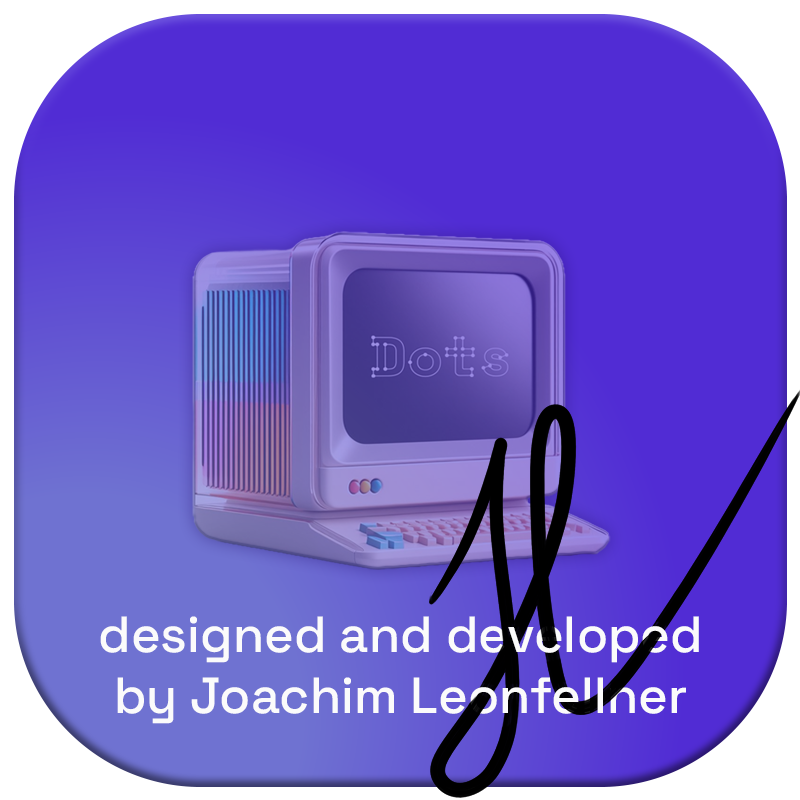
<style>
.page{position:relative;width:800px;height:800px;background:#512cd4}
.page>*{position:absolute;margin:0}
.t1{font:50.9px "SpaceGrotesk-Medium";color:#fbfbfb}
</style>
<div class="page">
<p class="t1" style="left:100px;top:616px;width:599px;height:108px;text-align:center">designed and developed<br>by Joachim Leonfellner</p>
</div>
